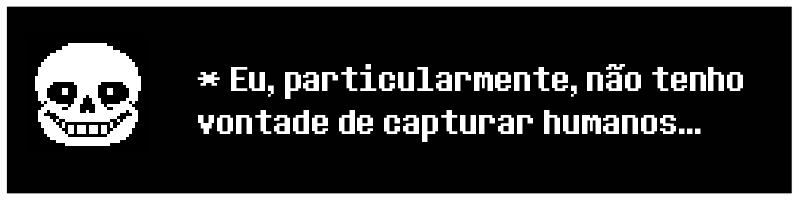
<style>
.page{position:relative;width:800px;height:200px;background:#010101}
.page>*{position:absolute;margin:0}
.t1{font:36px "DeterminationSans";color:#ffffff}
</style>
<div class="page">
<p class="t1" style="left:197px;top:64px;width:546px;height:78px">* Eu, particularmente, não tenho vontade de capturar humanos...</p>
</div>
